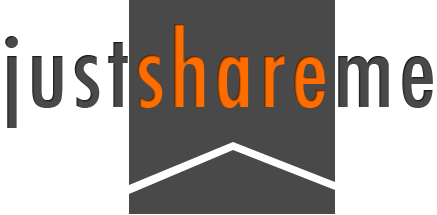
<style>
.page{position:relative;width:437px;height:215px;background:#ffffff}
.page>*{position:absolute;margin:0}
.t1{font:100px "Futura-CondensedMedium";letter-spacing:0.05em;color:#ff6c00}
.t2{font:100px "Futura-CondensedMedium";letter-spacing:0.05em;color:#494949}
</style>
<div class="page">
<p class="t1" style="left:5px;top:24px;width:428px;height:104px"><span class="t2">just</span>share<span class="t2">me</span></p>
</div>
